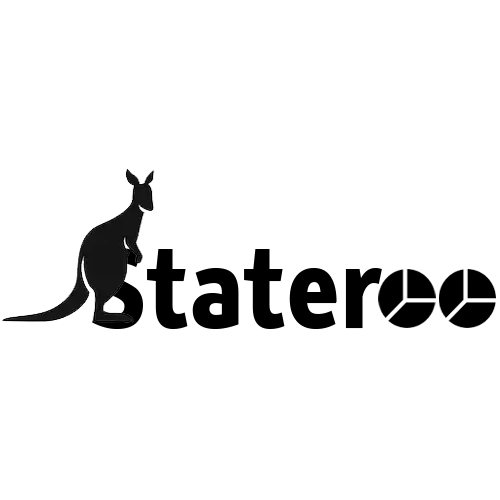
<style>
.page{position:relative;width:500px;height:500px;background:#ffffff}
.page>*{position:absolute;margin:0}
.t1{font:125px "RehnCondensed-Bold";color:#000000}
</style>
<div class="page">
<p class="t1" style="left:92px;top:248px;width:290px;height:81px">Stater</p>
</div>
